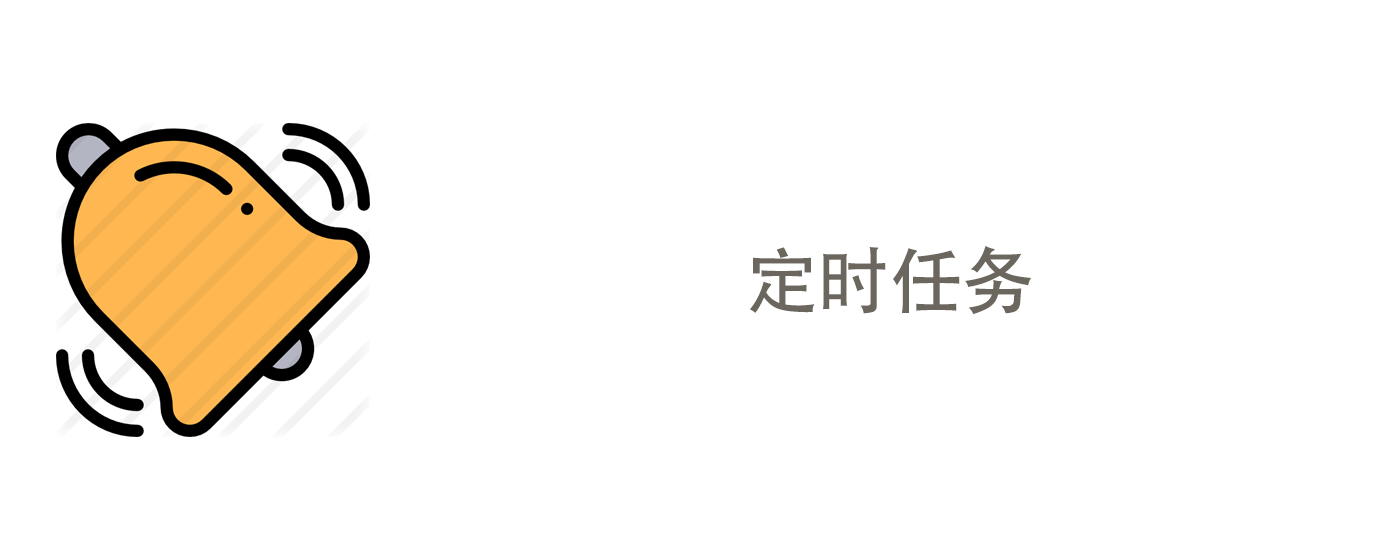
<style>
.page{position:relative;width:1400px;height:560px;background:#ffffff}
.page>*{position:absolute;margin:0}
.t1{font:72px "STHeitiSC-Medium";color:#6b675e}
</style>
<div class="page">
<p class="t1" style="left:750px;top:246px;width:281px;height:68px">定时任务</p>
</div>
